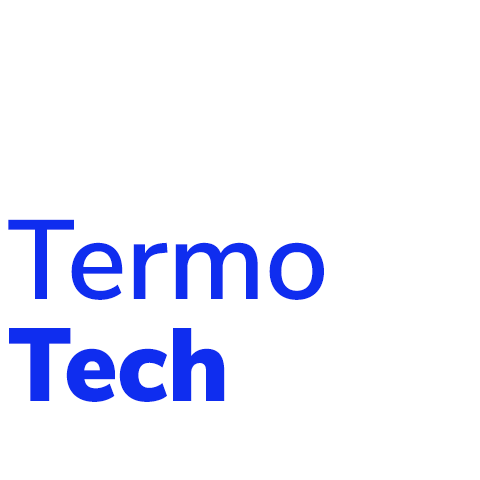
<style>
.page{position:relative;width:480px;height:480px;background:#ffffff}
.page>*{position:absolute;margin:0}
.t1{font:112.1px "NunitoSans-SemiBold";color:#0f2def}
.t2{font:103.4px "NunitoSans-Black";color:#0f2def}
</style>
<div class="page">
<p class="t1" style="left:8px;top:219px;width:316px;height:81px">Termo</p>
<p class="t2" style="left:9px;top:328px;width:216px;height:74px">Tech</p>
</div>
